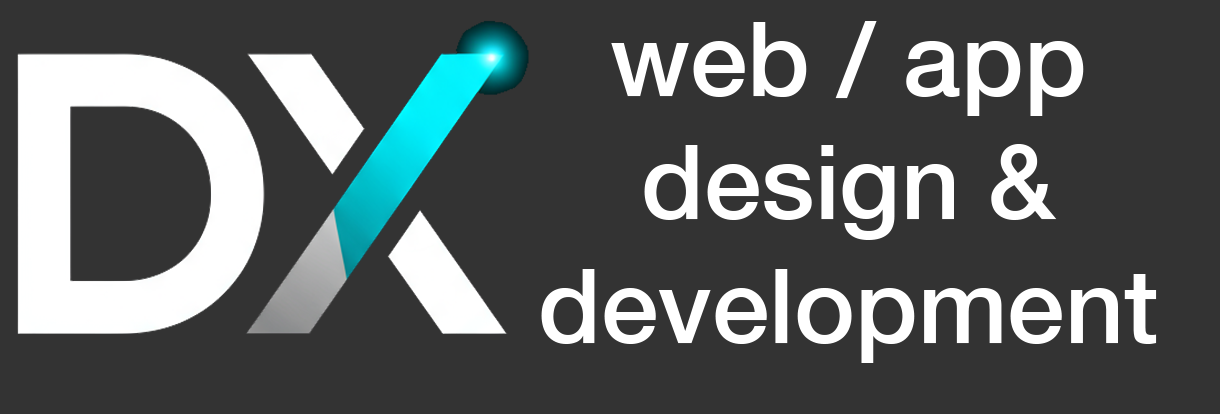
<style>
.page{position:relative;width:1220px;height:414px;background:#333333}
.page>*{position:absolute;margin:0}
.t1{font:103px "HelveticaNeue-Medium";color:#ffffff}
</style>
<div class="page">
<p class="t1" style="left:541px;top:21px;width:616px;height:342px;text-align:center">web / app<br>design &amp;<br>development</p>
</div>
